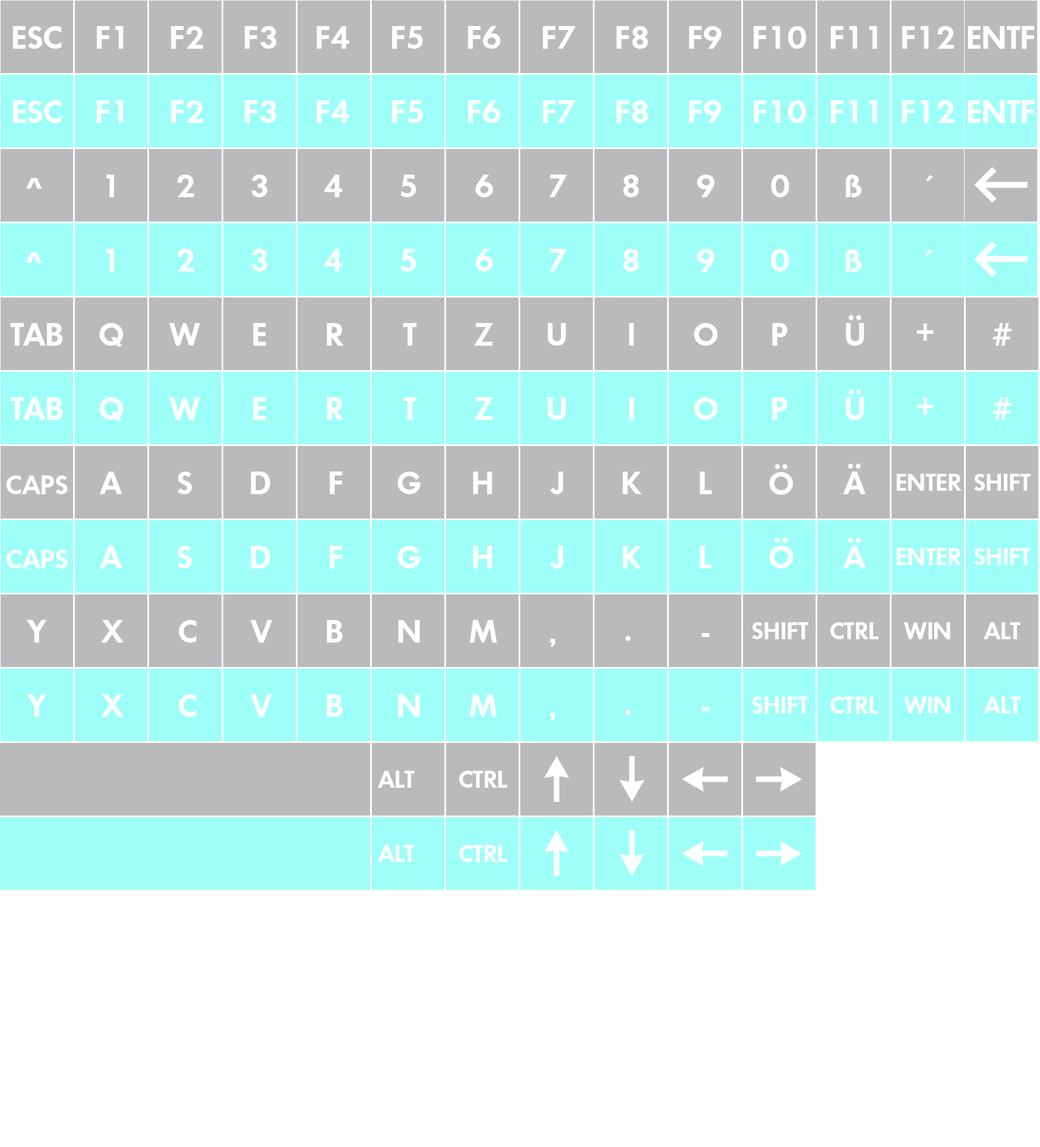
<style>
.page{position:relative;width:1040px;height:1147px;background:#bababa}
.page>*{position:absolute;margin:0}
.t1{font:34px "FuturaNo2D-DemiBold";color:#ffffff}
.t2{font:25.5px "FuturaNo2D-DemiBold";color:#ffffff}
.t3{font:28.3px "FuturaNo2D-DemiBold";color:#ffffff}
</style>
<div class="page">
<p class="t1" style="left:12px;top:26px;width:50px;height:23px">ESC</p>
<p class="t1" style="left:96px;top:26px;width:28px;height:23px">F1</p>
<p class="t1" style="left:171px;top:26px;width:32px;height:23px">F2</p>
<p class="t1" style="left:244px;top:26px;width:33px;height:23px">F3</p>
<p class="t1" style="left:316px;top:26px;width:33px;height:23px">F4</p>
<p class="t1" style="left:392px;top:26px;width:31px;height:23px">F5</p>
<p class="t1" style="left:467px;top:26px;width:33px;height:23px">F6</p>
<p class="t1" style="left:542px;top:26px;width:34px;height:23px">F7</p>
<p class="t1" style="left:616px;top:26px;width:32px;height:23px">F8</p>
<p class="t1" style="left:688px;top:26px;width:33px;height:23px">F9</p>
<p class="t1" style="left:753px;top:26px;width:53px;height:23px">F10</p>
<p class="t1" style="left:830px;top:26px;width:47px;height:23px">F11</p>
<p class="t1" style="left:901px;top:26px;width:53px;height:23px">F12</p>
<p class="t1" style="left:967px;top:26px;width:67px;height:23px">ENTF</p>
<p class="t1" style="left:12px;top:100px;width:50px;height:23px">ESC</p>
<p class="t1" style="left:96px;top:100px;width:28px;height:23px">F1</p>
<p class="t1" style="left:171px;top:100px;width:32px;height:23px">F2</p>
<p class="t1" style="left:244px;top:100px;width:33px;height:23px">F3</p>
<p class="t1" style="left:316px;top:100px;width:33px;height:23px">F4</p>
<p class="t1" style="left:392px;top:100px;width:31px;height:23px">F5</p>
<p class="t1" style="left:467px;top:100px;width:33px;height:23px">F6</p>
<p class="t1" style="left:542px;top:100px;width:34px;height:23px">F7</p>
<p class="t1" style="left:616px;top:100px;width:32px;height:23px">F8</p>
<p class="t1" style="left:688px;top:100px;width:33px;height:23px">F9</p>
<p class="t1" style="left:753px;top:100px;width:53px;height:23px">F10</p>
<p class="t1" style="left:830px;top:100px;width:47px;height:23px">F11</p>
<p class="t1" style="left:901px;top:100px;width:53px;height:23px">F12</p>
<p class="t1" style="left:967px;top:100px;width:67px;height:23px">ENTF</p>
<p class="t1" style="left:26px;top:178px;width:16px;height:11px">^</p>
<p class="t1" style="left:106px;top:175px;width:8px;height:22px">1</p>
<p class="t1" style="left:177px;top:175px;width:17px;height:22px">2</p>
<p class="t1" style="left:251px;top:175px;width:16px;height:22px">3</p>
<p class="t1" style="left:324px;top:175px;width:18px;height:22px">4</p>
<p class="t1" style="left:401px;top:175px;width:15px;height:22px">5</p>
<p class="t1" style="left:475px;top:175px;width:18px;height:22px">6</p>
<p class="t1" style="left:549px;top:175px;width:18px;height:22px">7</p>
<p class="t1" style="left:623px;top:175px;width:16px;height:22px">8</p>
<p class="t1" style="left:697px;top:175px;width:18px;height:22px">9</p>
<p class="t1" style="left:771px;top:175px;width:18px;height:22px">0</p>
<p class="t1" style="left:845px;top:175px;width:16px;height:22px">ß</p>
<p class="t1" style="left:925px;top:175px;width:8px;height:6px">´</p>
<p class="t1" style="left:26px;top:252px;width:16px;height:11px">^</p>
<p class="t1" style="left:106px;top:249px;width:8px;height:22px">1</p>
<p class="t1" style="left:177px;top:249px;width:17px;height:22px">2</p>
<p class="t1" style="left:251px;top:249px;width:16px;height:22px">3</p>
<p class="t1" style="left:324px;top:249px;width:18px;height:22px">4</p>
<p class="t1" style="left:401px;top:249px;width:15px;height:22px">5</p>
<p class="t1" style="left:475px;top:249px;width:18px;height:22px">6</p>
<p class="t1" style="left:549px;top:249px;width:18px;height:22px">7</p>
<p class="t1" style="left:623px;top:249px;width:16px;height:22px">8</p>
<p class="t1" style="left:697px;top:249px;width:18px;height:22px">9</p>
<p class="t1" style="left:771px;top:249px;width:18px;height:22px">0</p>
<p class="t1" style="left:845px;top:249px;width:16px;height:23px">ß</p>
<p class="t1" style="left:925px;top:249px;width:8px;height:7px">´</p>
<p class="t1" style="left:845px;top:315px;width:19px;height:31px">Ü</p>
<p class="t1" style="left:10px;top:323px;width:53px;height:23px">TAB</p>
<p class="t1" style="left:99px;top:323px;width:24px;height:24px">Q</p>
<p class="t1" style="left:169px;top:323px;width:31px;height:23px">W</p>
<p class="t1" style="left:253px;top:323px;width:13px;height:23px">E</p>
<p class="t1" style="left:326px;top:323px;width:18px;height:23px">R</p>
<p class="t1" style="left:403px;top:323px;width:14px;height:23px">T</p>
<p class="t1" style="left:474px;top:323px;width:19px;height:23px">Z</p>
<p class="t1" style="left:547px;top:323px;width:19px;height:23px">U</p>
<p class="t1" style="left:629px;top:323px;width:5px;height:23px">I</p>
<p class="t1" style="left:694px;top:323px;width:23px;height:23px">O</p>
<p class="t1" style="left:772px;top:323px;width:16px;height:23px">P</p>
<p class="t1" style="left:916px;top:324px;width:17px;height:17px">+</p>
<p class="t1" style="left:992px;top:323px;width:20px;height:23px">#</p>
<p class="t1" style="left:845px;top:389px;width:19px;height:31px">Ü</p>
<p class="t1" style="left:10px;top:397px;width:53px;height:23px">TAB</p>
<p class="t1" style="left:99px;top:397px;width:24px;height:24px">Q</p>
<p class="t1" style="left:169px;top:397px;width:31px;height:23px">W</p>
<p class="t1" style="left:253px;top:397px;width:13px;height:23px">E</p>
<p class="t1" style="left:326px;top:397px;width:18px;height:23px">R</p>
<p class="t1" style="left:403px;top:397px;width:14px;height:23px">T</p>
<p class="t1" style="left:474px;top:397px;width:19px;height:23px">Z</p>
<p class="t1" style="left:547px;top:397px;width:19px;height:23px">U</p>
<p class="t1" style="left:629px;top:397px;width:5px;height:23px">I</p>
<p class="t1" style="left:694px;top:397px;width:23px;height:23px">O</p>
<p class="t1" style="left:772px;top:397px;width:16px;height:23px">P</p>
<p class="t1" style="left:916px;top:398px;width:17px;height:17px">+</p>
<p class="t1" style="left:992px;top:397px;width:20px;height:23px">#</p>
<p class="t1" style="left:99px;top:471px;width:23px;height:23px">A</p>
<p class="t1" style="left:177px;top:471px;width:15px;height:23px">S</p>
<p class="t1" style="left:250px;top:471px;width:20px;height:23px">D</p>
<p class="t1" style="left:329px;top:471px;width:13px;height:23px">F</p>
<p class="t1" style="left:397px;top:471px;width:23px;height:23px">G</p>
<p class="t1" style="left:473px;top:471px;width:19px;height:23px">H</p>
<p class="t1" style="left:550px;top:471px;width:13px;height:23px">J</p>
<p class="t1" style="left:622px;top:471px;width:19px;height:23px">K</p>
<p class="t1" style="left:699px;top:471px;width:13px;height:23px">L</p>
<p class="t1" style="left:769px;top:464px;width:24px;height:31px">Ö</p>
<p class="t1" style="left:843px;top:463px;width:23px;height:31px">Ä</p>
<p class="t2" style="left:896px;top:474px;width:66px;height:17px">ENTER</p>
<p class="t2" style="left:974px;top:474px;width:57px;height:17px">SHIFT</p>
<p class="t3" style="left:6px;top:475px;width:61px;height:19px">CAPS</p>
<p class="t1" style="left:99px;top:546px;width:23px;height:22px">A</p>
<p class="t1" style="left:177px;top:546px;width:15px;height:22px">S</p>
<p class="t1" style="left:250px;top:546px;width:20px;height:22px">D</p>
<p class="t1" style="left:329px;top:546px;width:13px;height:22px">F</p>
<p class="t1" style="left:397px;top:546px;width:23px;height:22px">G</p>
<p class="t1" style="left:473px;top:546px;width:19px;height:22px">H</p>
<p class="t1" style="left:550px;top:546px;width:13px;height:22px">J</p>
<p class="t1" style="left:622px;top:546px;width:19px;height:22px">K</p>
<p class="t1" style="left:699px;top:546px;width:13px;height:22px">L</p>
<p class="t1" style="left:769px;top:538px;width:24px;height:30px">Ö</p>
<p class="t1" style="left:843px;top:538px;width:23px;height:30px">Ä</p>
<p class="t3" style="left:6px;top:550px;width:61px;height:18px">CAPS</p>
<p class="t2" style="left:896px;top:548px;width:66px;height:17px">ENTER</p>
<p class="t2" style="left:974px;top:548px;width:57px;height:17px">SHIFT</p>
<p class="t1" style="left:27px;top:620px;width:20px;height:23px">Y</p>
<p class="t1" style="left:101px;top:620px;width:23px;height:23px">X</p>
<p class="t1" style="left:178px;top:620px;width:19px;height:23px">C</p>
<p class="t1" style="left:250px;top:620px;width:23px;height:23px">V</p>
<p class="t1" style="left:326px;top:620px;width:17px;height:23px">B</p>
<p class="t1" style="left:398px;top:620px;width:22px;height:23px">N</p>
<p class="t1" style="left:469px;top:620px;width:28px;height:23px">M</p>
<p class="t2" style="left:752px;top:622px;width:57px;height:17px">SHIFT</p>
<p class="t2" style="left:830px;top:622px;width:48px;height:17px">CTRL</p>
<p class="t2" style="left:903px;top:622px;width:47px;height:17px">WIN</p>
<p class="t2" style="left:983px;top:622px;width:37px;height:17px">ALT</p>
<p class="t1" style="left:550px;top:639px;width:5px;height:8px">,</p>
<p class="t1" style="left:625px;top:636px;width:6px;height:5px">.</p>
<p class="t1" style="left:701px;top:633px;width:8px;height:4px">-</p>
<p class="t1" style="left:27px;top:694px;width:20px;height:23px">Y</p>
<p class="t1" style="left:101px;top:694px;width:23px;height:23px">X</p>
<p class="t1" style="left:178px;top:694px;width:19px;height:23px">C</p>
<p class="t1" style="left:250px;top:694px;width:23px;height:23px">V</p>
<p class="t1" style="left:326px;top:694px;width:17px;height:23px">B</p>
<p class="t1" style="left:398px;top:694px;width:22px;height:23px">N</p>
<p class="t1" style="left:469px;top:694px;width:28px;height:23px">M</p>
<p class="t2" style="left:752px;top:696px;width:57px;height:17px">SHIFT</p>
<p class="t2" style="left:830px;top:696px;width:48px;height:17px">CTRL</p>
<p class="t2" style="left:903px;top:696px;width:47px;height:17px">WIN</p>
<p class="t2" style="left:983px;top:696px;width:37px;height:17px">ALT</p>
<p class="t1" style="left:550px;top:713px;width:5px;height:8px">,</p>
<p class="t1" style="left:625px;top:710px;width:6px;height:5px">.</p>
<p class="t1" style="left:701px;top:707px;width:8px;height:4px">-</p>
<p class="t2" style="left:377px;top:771px;width:38px;height:17px">ALT</p>
<p class="t2" style="left:459px;top:771px;width:48px;height:17px">CTRL</p>
<p class="t2" style="left:377px;top:845px;width:38px;height:17px">ALT</p>
<p class="t2" style="left:459px;top:845px;width:48px;height:17px">CTRL</p>
</div>
